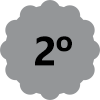
<style>
.page{position:relative;width:100px;height:100px;background:#949698}
.page>*{position:absolute;margin:0}
.t1{font:41px "KhmerUI-Bold";letter-spacing:-0.04em;color:#000000}
</style>
<div class="page">
<p class="t1" style="left:35px;top:36px;width:37px;height:30px">2º</p>
</div>
